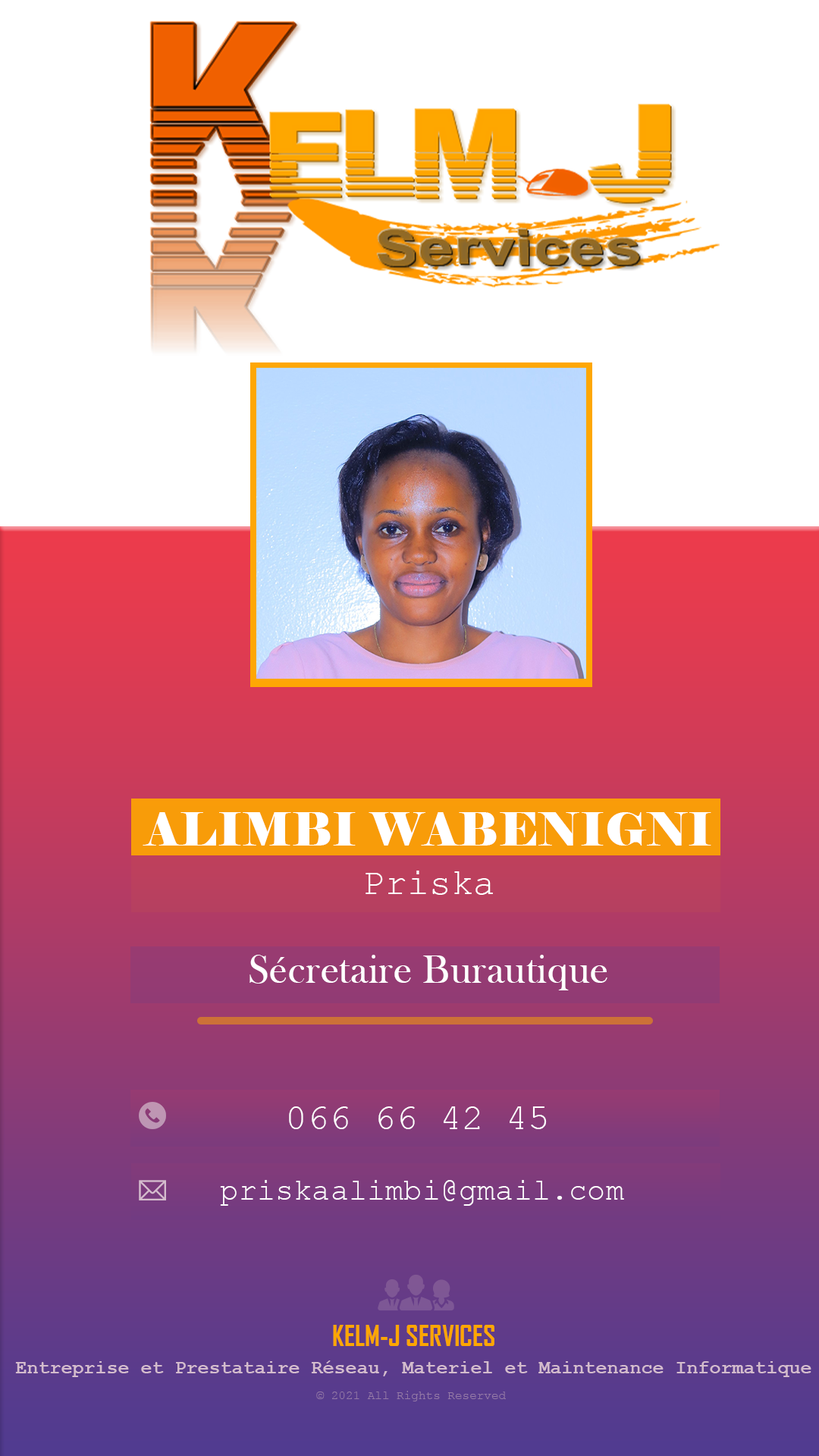
<style>
.page{position:relative;width:819px;height:1456px;background:#ffffff}
.page>*{position:absolute;margin:0}
.t1{font:45.5px "Elephant-Regular";letter-spacing:0.01em;color:#ffffff}
.t2{font:36.4px "CourierNewPSMT";letter-spacing:0.005em;color:#ffffff}
.t3{font:40.9px "BaskOldFace";letter-spacing:0.01em;color:#ffffff}
.t4{font:30.3px "CourierNewPSMT";letter-spacing:0.005em;color:#ffffff}
.t5{font:27.3px "AgencyFB-Bold";color:#fea600}
.t6{font:19px "CourierNewPS-BoldMT";color:#ebbfdf}
.t7{font:12.1px "CourierNewPSMT";color:#957aa7}
</style>
<div class="page">
<p class="t1" style="left:143px;top:812px;width:568px;height:34px">ALIMBI WABENIGNI</p>
<p class="t2" style="left:366px;top:871px;width:127px;height:24px">Priska</p>
<p class="t3" style="left:249px;top:955px;width:358px;height:35px">Sécretaire Burautique</p>
<p class="t2" style="left:289px;top:1106px;width:258px;height:23px">066 66 42 45</p>
<p class="t4" style="left:220px;top:1180px;width:404px;height:26px">priskaalimbi@gmail.com</p>
<p class="t5" style="left:333px;top:1325px;width:161px;height:21px">KELM-J SERVICES</p>
<p class="t6" style="left:15px;top:1360px;width:796px;height:17px">Entreprise et Prestataire Réseau, Materiel et Maintenance Informatique</p>
<p class="t7" style="left:316px;top:1391px;width:190px;height:10px">© 2021 All Rights Reserved</p>
</div>
